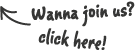
<style>
.page{position:relative;width:139px;height:52px;background:#ffffff}
.page>*{position:absolute;margin:0}
.t1{font:24.1px "Romy";color:#363635;font-weight:bold;scale:0.89 1}
</style>
<div class="page">
<p class="t1" style="left:31px;top:1px;width:104px;height:26px;rotate:-3deg">Wanna join us?</p>
<p class="t1" style="left:38px;top:28px;width:69px;height:22px;rotate:6deg">click here!</p>
</div>
